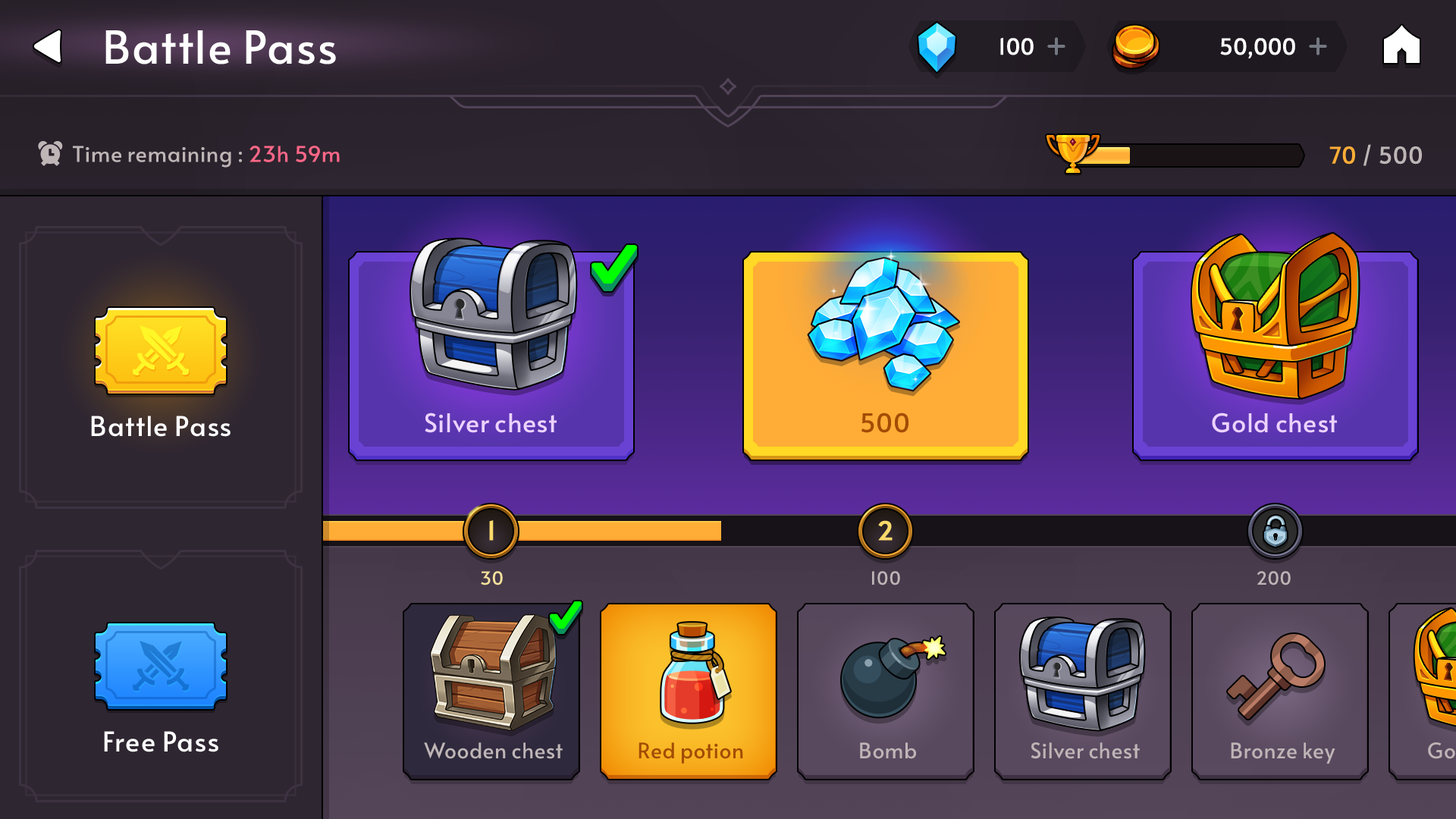
<style>
.page{position:relative;width:1456px;height:819px}
.page>*{position:absolute;margin:0}
.t1{font:45.5px "Alata-Regular";color:#ffffff}
.t2{font:21.9px "Alata-Regular";letter-spacing:-0.025em;color:#ffffff;font-weight:bold}
.t3{font:21.8px "Alata-Regular";letter-spacing:-0.01em;color:#beb5b6}
.t4{font:21.8px "Alata-Regular";letter-spacing:-0.01em;color:#ff6788}
.t5{font:22.7px "Alata-Regular";color:#beb5b6}
.t6{font:22.7px "Alata-Regular";color:#ffad37}
.t7{font:25.8px "Alata-Regular";letter-spacing:-0.01em;color:#ecd2ff}
.t8{font:25.8px "Alata-Regular";letter-spacing:-0.01em;color:#a34c05}
.t9{font:27.3px "Alata-Regular";color:#ffffff}
.t10{font:25.8px "Alata-Regular";color:#fada6b;font-weight:bold}
.t11{font:18.2px "Alata-Regular";color:#f6e19c}
.t12{font:18.2px "Alata-Regular";color:#beb5b6}
.t13{font:21.2px "Alata-Regular";letter-spacing:-0.01em;color:#beb5b6}
.t14{font:21.2px "Alata-Regular";letter-spacing:-0.01em;color:#a34c05}
</style>
<div class="page">
<p class="t1" style="left:105px;top:30px;width:231px;height:34px">Battle Pass</p>
<p class="t2" style="left:1000px;top:37px;width:34px;height:18px">100</p>
<p class="t2" style="left:1220px;top:38px;width:75px;height:20px">50,000</p>
<p class="t3" style="left:73px;top:146px;width:267px;height:22px">Time remaining : <span class="t4">23h 59m</span></p>
<p class="t5" style="left:1329px;top:144px;width:93px;height:22px"><span class="t6">70 </span>/ 500</p>
<p class="t7" style="left:425px;top:413px;width:132px;height:20px">Silver chest</p>
<p class="t8" style="left:861px;top:413px;width:47px;height:20px">500</p>
<p class="t8" style="left:861px;top:413px;width:47px;height:20px">500</p>
<p class="t7" style="left:1212px;top:413px;width:125px;height:20px">Gold chest</p>
<p class="t9" style="left:91px;top:416px;width:140px;height:21px">Battle Pass</p>
<p class="t10" style="left:489px;top:520px;width:5px;height:21px">1</p>
<p class="t10" style="left:878px;top:520px;width:15px;height:21px">2</p>
<p class="t11" style="left:481px;top:571px;width:22px;height:14px">30</p>
<p class="t12" style="left:872px;top:571px;width:28px;height:14px">100</p>
<p class="t12" style="left:1257px;top:571px;width:34px;height:14px">200</p>
<p class="t9" style="left:104px;top:731px;width:114px;height:21px">Free Pass</p>
<p class="t13" style="left:424px;top:742px;width:139px;height:17px">Wooden chest</p>
<p class="t14" style="left:639px;top:742px;width:104px;height:22px">Red potion</p>
<p class="t13" style="left:860px;top:742px;width:56px;height:17px">Bomb</p>
<p class="t13" style="left:1031px;top:742px;width:109px;height:17px">Silver chest</p>
<p class="t13" style="left:1231px;top:742px;width:104px;height:22px">Bronze key</p>
</div>
